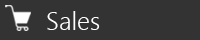
<style>
.page{position:relative;width:200px;height:40px;background:#333333}
.page>*{position:absolute;margin:0}
.t1{font:25px "SegoeUI-Semilight";color:#ffffff}
</style>
<div class="page">
<p class="t1" style="left:47px;top:11px;width:53px;height:19px">Sales</p>
</div>
